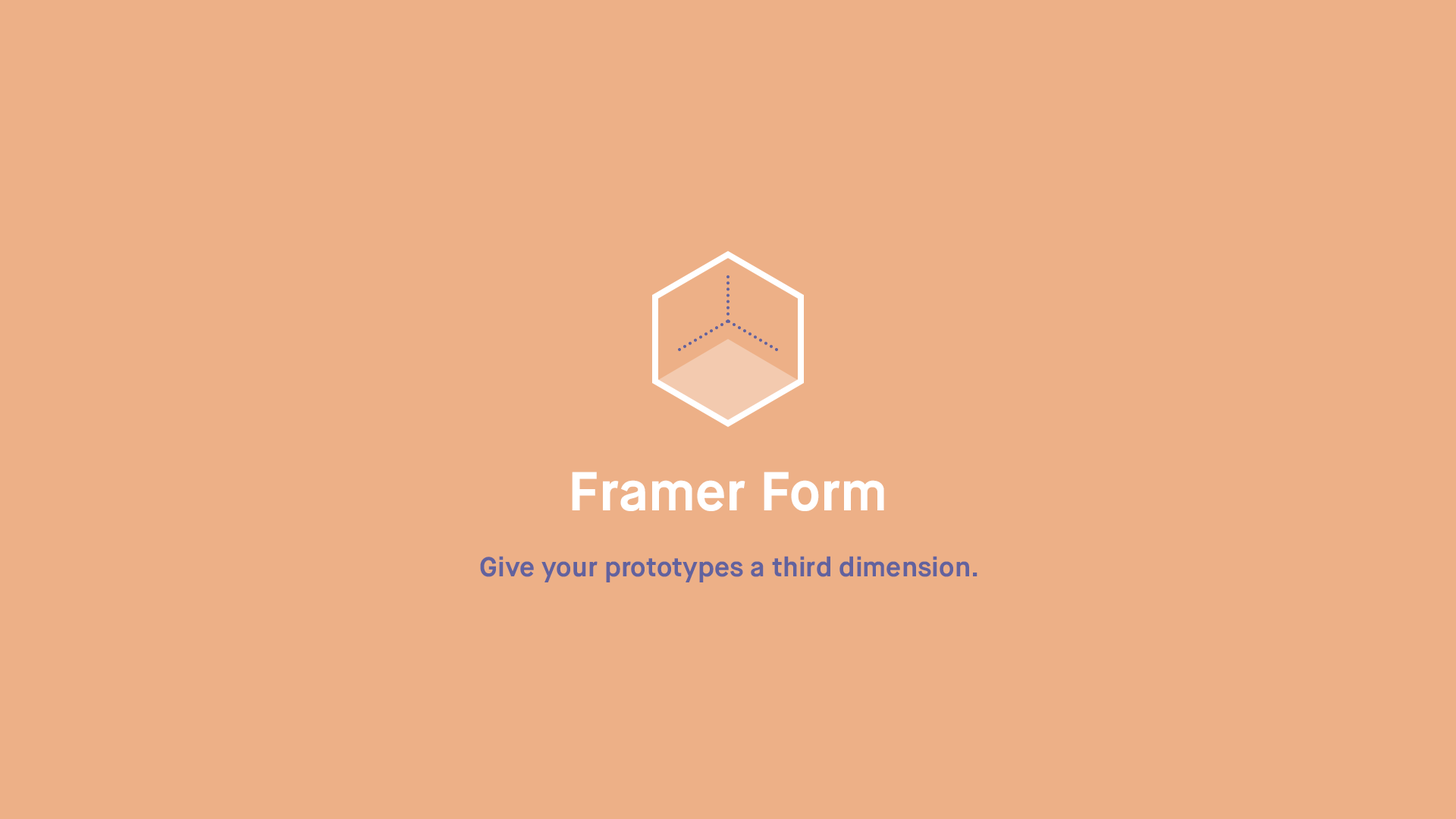
<style>
.page{position:relative;width:1456px;height:819px;background:#edb087}
.page>*{position:absolute;margin:0}
.t1{font:54.6px "MaisonNeue-Bold";color:#ffffff}
.t2{font:27.3px "MaisonNeue-Bold";color:#62629e}
</style>
<div class="page">
<p class="t1" style="left:572px;top:472px;width:312px;height:39px">Framer Form</p>
<p class="t2" style="left:480px;top:556px;width:497px;height:26px">Give your prototypes a third dimension.</p>
</div>
